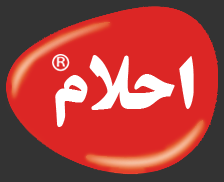
<style>
.page{position:relative;width:224px;height:182px;background:#dc2625}
.page>*{position:absolute;margin:0}
.t1{font:71.6px "BTitrBold";color:#ffffff}
</style>
<div class="page">
<p class="t1" style="left:55px;top:55px;width:139px;height:72px">احلام</p>
</div>
